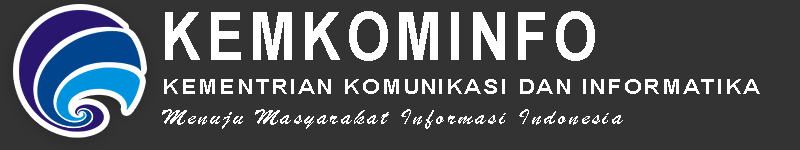
<style>
.page{position:relative;width:800px;height:150px;background:#333333}
.page>*{position:absolute;margin:0}
.t1{font:67px "Arial-BoldMT";letter-spacing:0.105em;color:#ffffff;scale:0.82 1}
.t2{font:20.2px "Arial-BoldMT";letter-spacing:0.105em;color:#ffffff;scale:1.13 1}
.t3{font:22.7px "BrushScriptMT";letter-spacing:0.105em;color:#ffffff;scale:1.13 1}
</style>
<div class="page">
<p class="t1" style="left:165px;top:11px;width:430px;height:50px">KEMKOMINFO</p>
<p class="t2" style="left:164px;top:79px;width:596px;height:15px">KEMENTRIAN KOMUNIKASI DAN INFORMATIKA</p>
<p class="t3" style="left:162px;top:109px;width:461px;height:20px">Menuju Masyarakat Informasi Indonesia</p>
</div>
